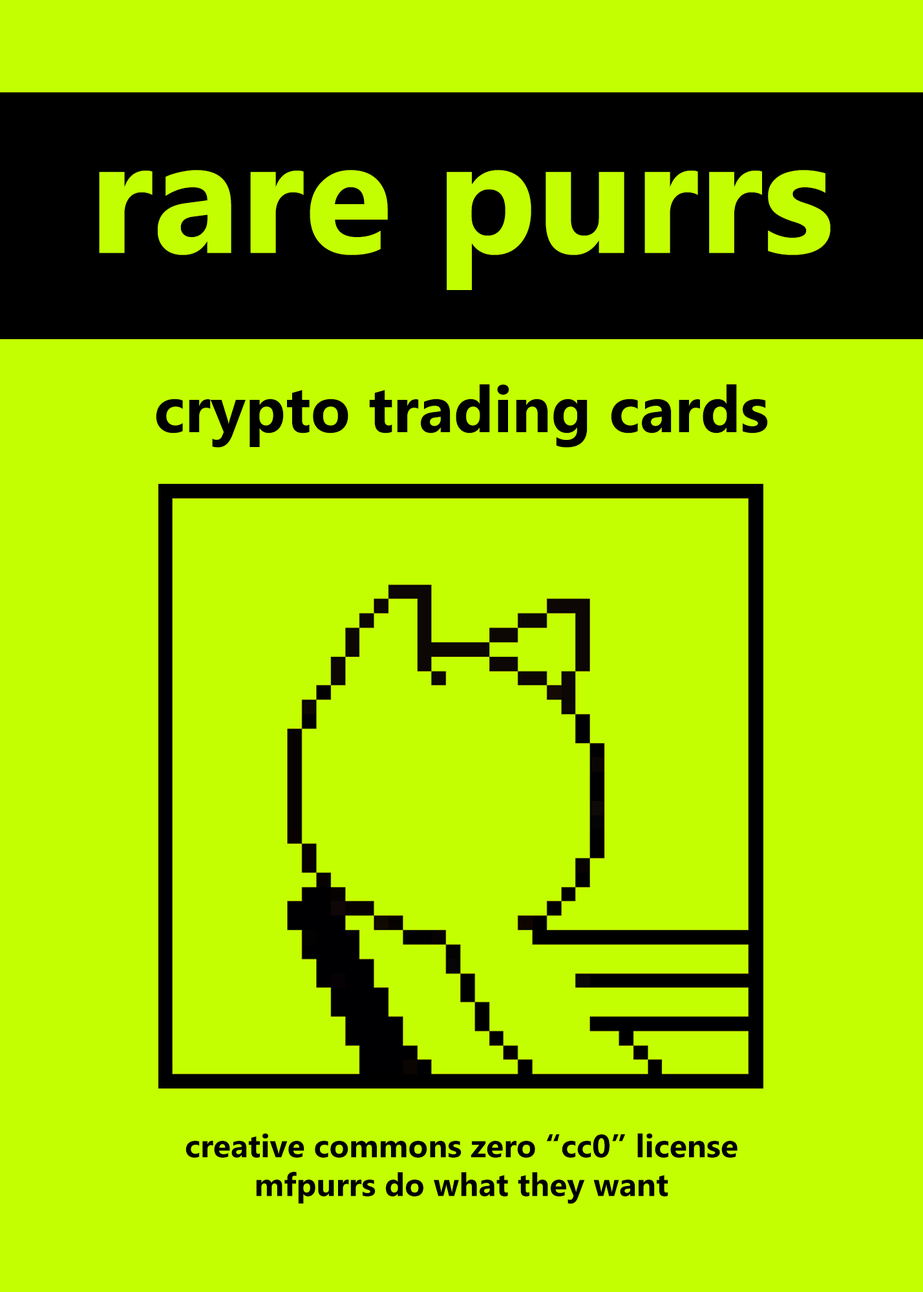
<style>
.page{position:relative;width:923px;height:1292px;background:#c3ff00}
.page>*{position:absolute;margin:0}
.t1{font:161.5px "Ebrima-Bold";color:#c4ff01}
.t2{font:64.6px "Ebrima-Bold";color:#000000}
.t3{font:32.3px "Ebrima-Bold";color:#000000}
</style>
<div class="page">
<p class="t1" style="left:99px;top:170px;width:731px;height:120px">rare purrs</p>
<p class="t2" style="left:156px;top:384px;width:612px;height:64px">crypto trading cards</p>
<p class="t3" style="left:185px;top:1133px;width:552px;height:71px;text-align:center">creative commons zero “cc0” license<br>mfpurrs do what they want</p>
</div>
